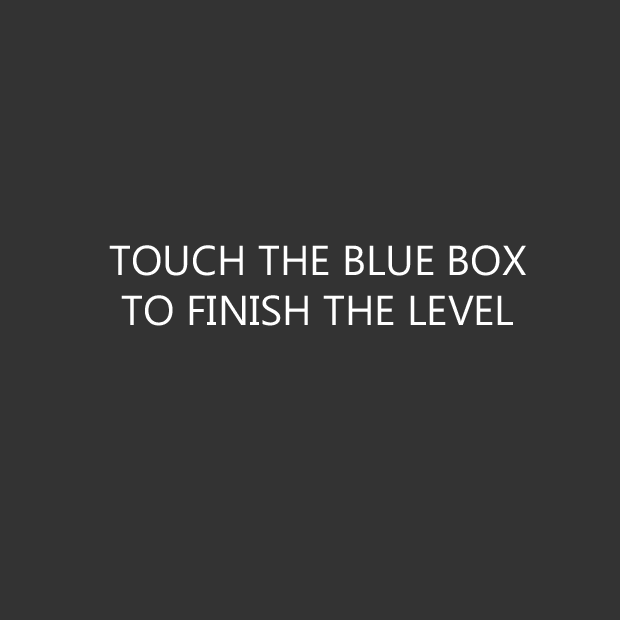
<style>
.page{position:relative;width:620px;height:620px;background:#333333}
.page>*{position:absolute;margin:0}
.t1{font:41.7px "MicrosoftPhagsPa";color:#ffffff}
</style>
<div class="page">
<p class="t1" style="left:109px;top:245px;width:417px;height:81px;text-align:center">TOUCH THE BLUE BOX<br>TO FINISH THE LEVEL</p>
</div>
